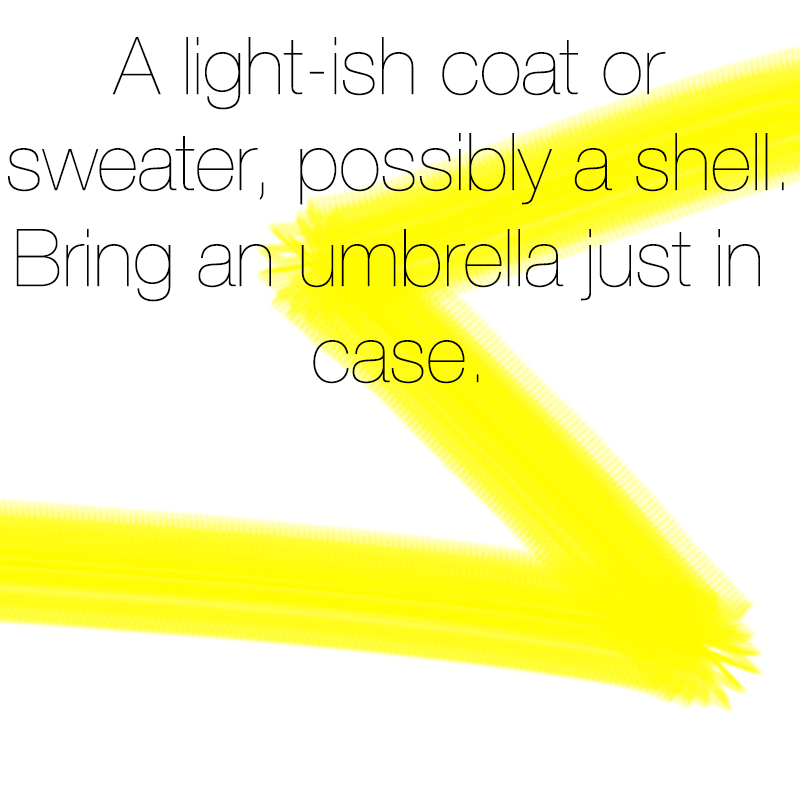
<style>
.page{position:relative;width:800px;height:800px;background:#ffffff}
.page>*{position:absolute;margin:0}
.t1{font:80px "HelveticaNeue-UltraLight";color:#000000}
</style>
<div class="page">
<p class="t1" style="left:8px;top:37px;width:776px;height:347px;text-align:center">A light-ish coat or <br>sweater, possibly a shell.<br>Bring an umbrella just in <br>case.</p>
</div>
